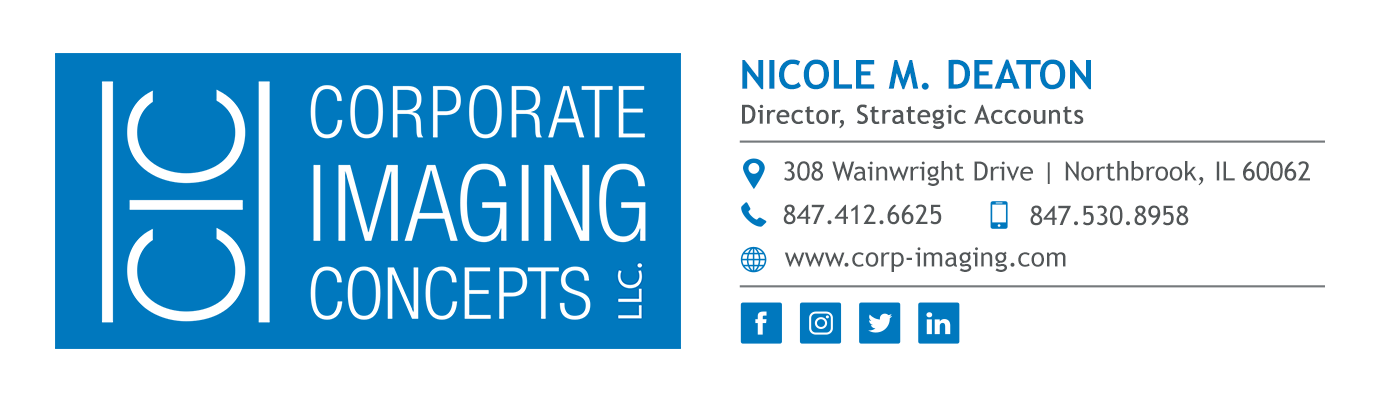
<style>
.page{position:relative;width:1380px;height:400px;background:#ffffff}
.page>*{position:absolute;margin:0}
.t1{font:40.2px "TrebuchetMS-Bold";color:#0078be;text-transform:uppercase}
.t2{font:25.9px "TrebuchetMS";color:#525658;font-weight:bold}
.t3{font:26.5px "TrebuchetMS";color:#525658}
.t4{font:26.8px "TrebuchetMS";color:#525658;text-transform:uppercase}
.t5{font:26.8px "TrebuchetMS";color:#525658}
</style>
<div class="page">
<p class="t1" style="left:742px;top:59px;width:349px;height:31px">Nicole M. Deaton</p>
<p class="t2" style="left:742px;top:104px;width:342px;height:25px">Director, Strategic Accounts</p>
<p class="t3" style="left:784px;top:161px;width:526px;height:25px">308 Wainwright Drive | Northbrook, IL 60062</p>
<p class="t4" style="left:783px;top:204px;width:159px;height:21px">847.412.6625</p>
<p class="t4" style="left:1030px;top:205px;width:159px;height:21px">847.530.8958</p>
<p class="t5" style="left:784px;top:247px;width:282px;height:25px">www.corp-imaging.com</p>
</div>
